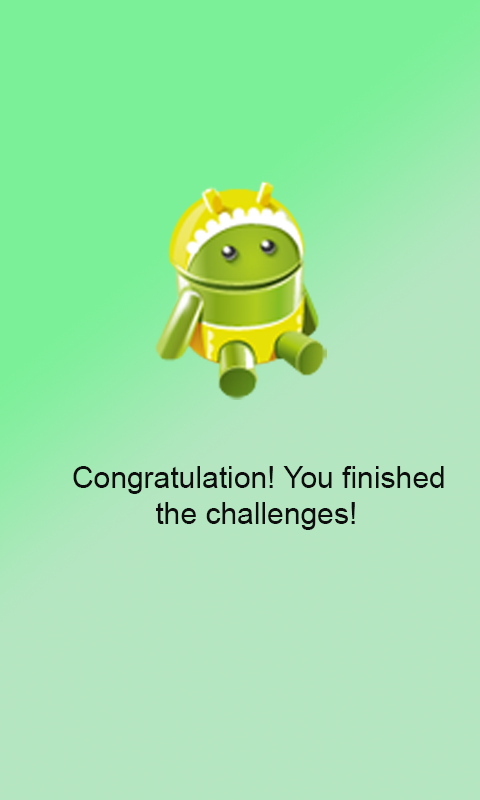
<style>
.page{position:relative;width:480px;height:800px}
.page>*{position:absolute;margin:0}
.t1{font:30px "ArialMT";color:#0c0d0c}
</style>
<div class="page">
<p class="t1" style="left:73px;top:466px;width:371px;height:64px">Congratulation! You finished <br>          the challenges!</p>
</div>
